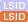
<style>
.page{position:relative;width:28px;height:22px;background:#ed7039}
.page>*{position:absolute;margin:0}
.t1{font:9px "UniversLTStd";letter-spacing:0.05em;color:#ffffff}
</style>
<div class="page">
<p class="t1" style="left:4px;top:2px;width:21px;height:7px">LSID</p>
<p class="t1" style="left:4px;top:13px;width:21px;height:7px">LSID</p>
</div>
